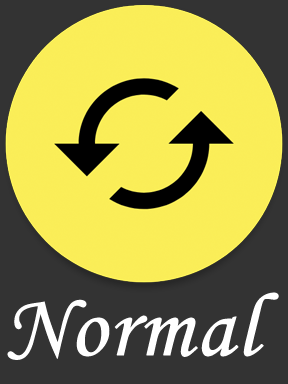
<style>
.page{position:relative;width:288px;height:384px;background:#333333}
.page>*{position:absolute;margin:0}
.t1{font:90px "MonotypeCorsiva";color:#ffffff;font-weight:bold}
</style>
<div class="page">
<p class="t1" style="left:7px;top:292px;width:272px;height:68px">Normal</p>
</div>
